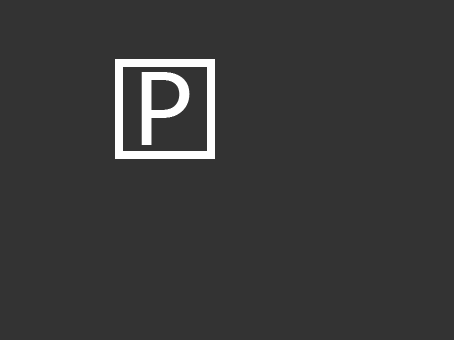
<style>
.page{position:relative;width:454px;height:340px;background:#333333}
.page>*{position:absolute;margin:0}
.t1{font:100px "Verdana";color:#ffffff}
</style>
<div class="page">
<p class="t1" style="left:141px;top:72px;width:49px;height:73px">P</p>
</div>
